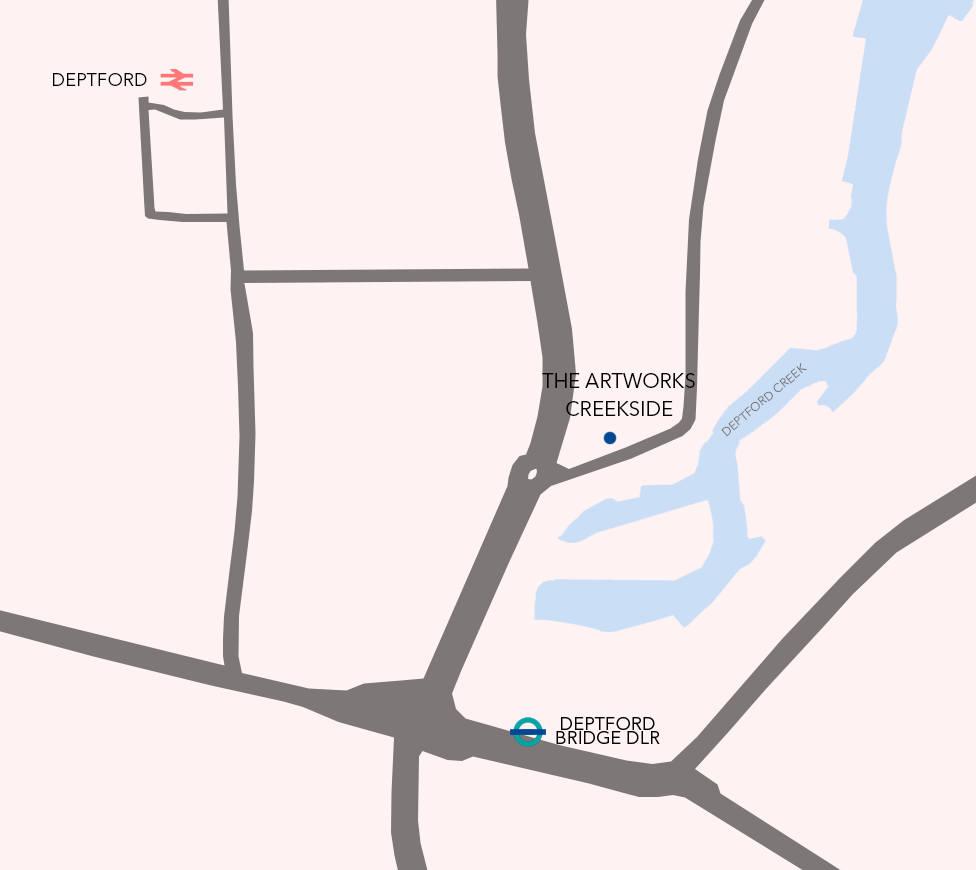
<style>
.page{position:relative;width:976px;height:870px;background:#fef2f2}
.page>*{position:absolute;margin:0}
.t1{font:18px "AvenirNextLTPro-Regular";letter-spacing:0.01em;color:#000000}
.t2{font:12px "AvenirNextLTPro-Regular";letter-spacing:0.01em;color:#7d7777}
.t3{font:20px/14px "AvenirNextLTPro-Regular";letter-spacing:0.01em;color:#000000}
</style>
<div class="page">
<p class="t1" style="left:53px;top:73px;width:94px;height:13px">DEPTFORD</p>
<p class="t2" style="left:721px;top:362px;width:86px;height:75px;rotate:-40deg">DEPTFORD CREEK</p>
<p class="t3" style="left:542px;top:373px;width:153px;height:43px;text-align:center">THE ARTWORKS<br><br>CREEKSIDE</p>
</div>
